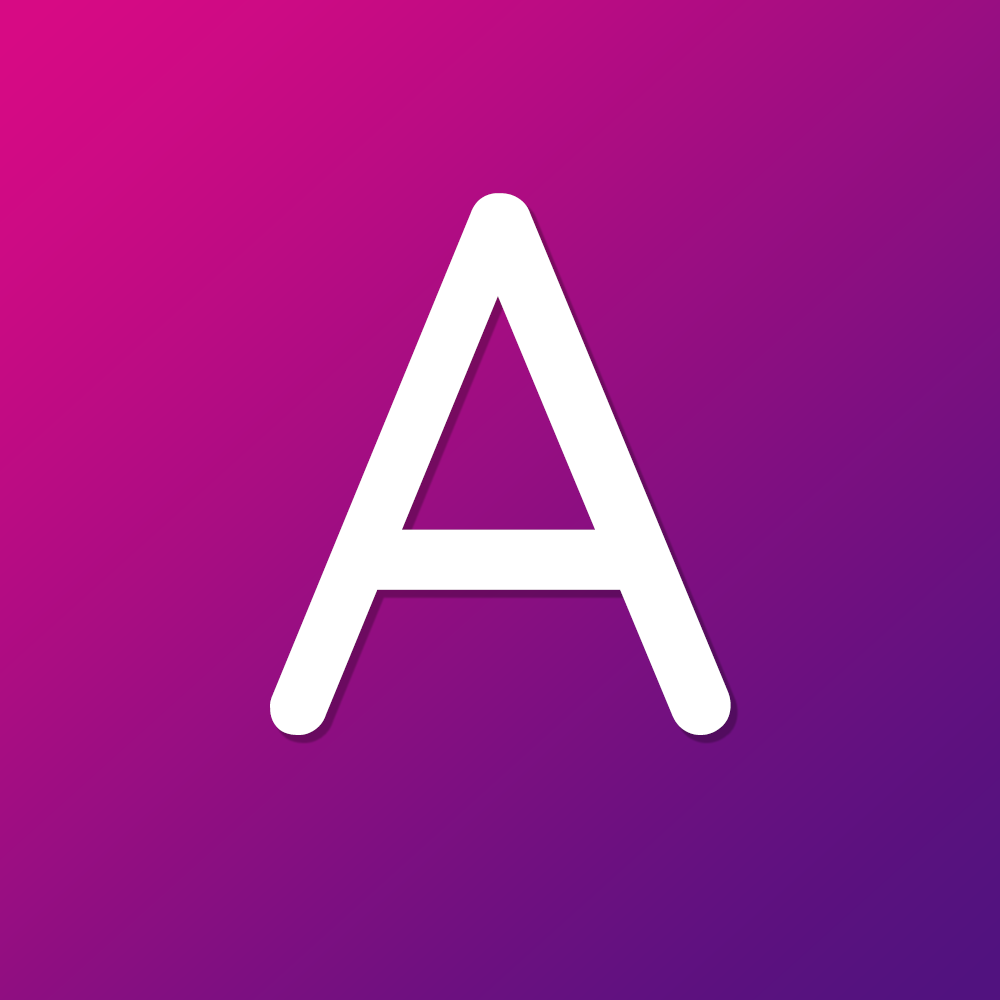
<style>
.page{position:relative;width:1000px;height:1000px}
.page>*{position:absolute;margin:0}
.t1{font:768px "Quicksand-Medium";color:#ffffff}
</style>
<div class="page">
<p class="t1" style="left:270px;top:193px;width:461px;height:542px">A</p>
</div>
